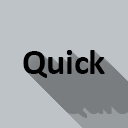
<style>
.page{position:relative;width:128px;height:128px;background:#bdc3c7}
.page>*{position:absolute;margin:0}
.t1{font:36px "Calibri-Bold";letter-spacing:-0.01em;color:#000000}
</style>
<div class="page">
<p class="t1" style="left:23px;top:50px;width:82px;height:28px">Quick</p>
</div>
